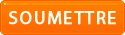
<style>
.page{position:relative;width:125px;height:35px}
.page>*{position:absolute;margin:0}
.t1{font:18.4px "MyriadPro-Regular";letter-spacing:0.06em;color:#ffffff;font-weight:bold}
</style>
<div class="page">
<p class="t1" style="left:8px;top:11px;width:108px;height:14px">SOUMETTRE</p>
</div>
